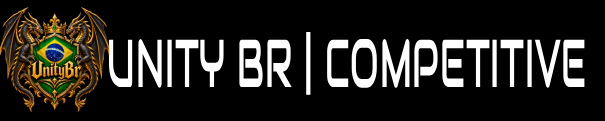
<style>
.page{position:relative;width:605px;height:121px;background:#000000}
.page>*{position:absolute;margin:0}
.t1{font:67.5px "Audiowide-Regular";letter-spacing:0.029em;color:#ffffff;scale:0.49 1}
</style>
<div class="page">
<p class="t1" style="left:108px;top:32px;width:477px;height:63px">UNITY BR | COMPETITIVE</p>
</div>
